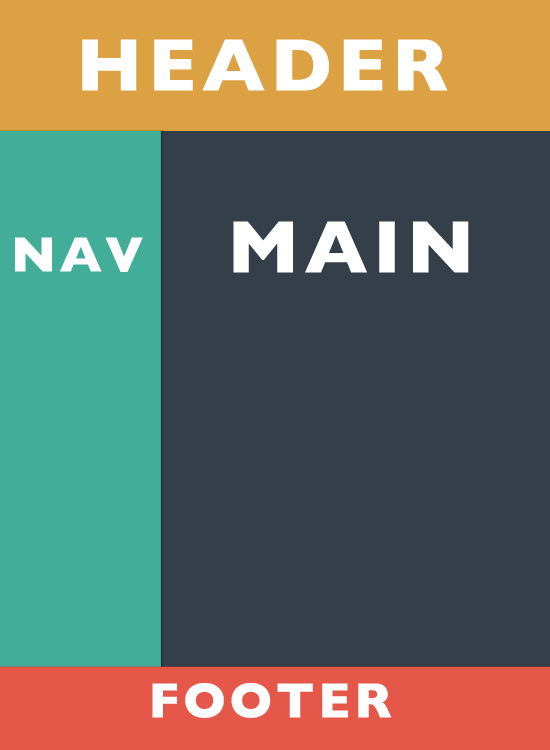
<style>
.page{position:relative;width:550px;height:750px;background:#343f4a}
.page>*{position:absolute;margin:0}
.t1{font:75px "GillSans-Bold";letter-spacing:0.075em;color:#ffffff}
.t2{font:50px "GillSans-Bold";letter-spacing:0.075em;color:#ffffff}
</style>
<div class="page">
<p class="t1" style="left:82px;top:39px;width:366px;height:52px">HEADER</p>
<p class="t1" style="left:233px;top:221px;width:236px;height:52px">MAIN</p>
<p class="t2" style="left:15px;top:237px;width:128px;height:35px">NAV</p>
<p class="t2" style="left:152px;top:683px;width:240px;height:35px">FOOTER</p>
</div>
